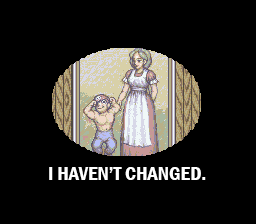
<style>
.page{position:relative;width:256px;height:224px;background:#000000}
.page>*{position:absolute;margin:0}
.t1{font:20px "FranklinGothic-DemiCond";color:#ffffff}
</style>
<div class="page">
<p class="t1" style="left:49px;top:167px;width:157px;height:13px">I HAVEN’T CHANGED.</p>
</div>
